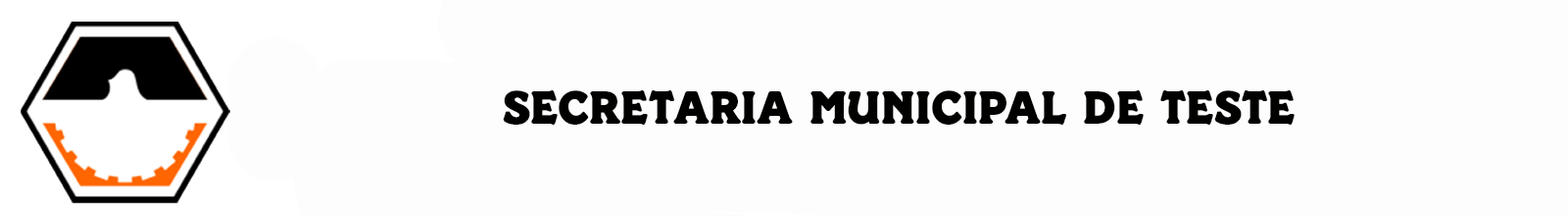
<style>
.page{position:relative;width:1568px;height:216px;background:#fdfdfe}
.page>*{position:absolute;margin:0}
.t1{font:48.6px "Paddington";color:#010100}
</style>
<div class="page">
<p class="t1" style="left:503px;top:90px;width:792px;height:34px">SECRETARIA MUNICIPAL DE TESTE</p>
</div>
